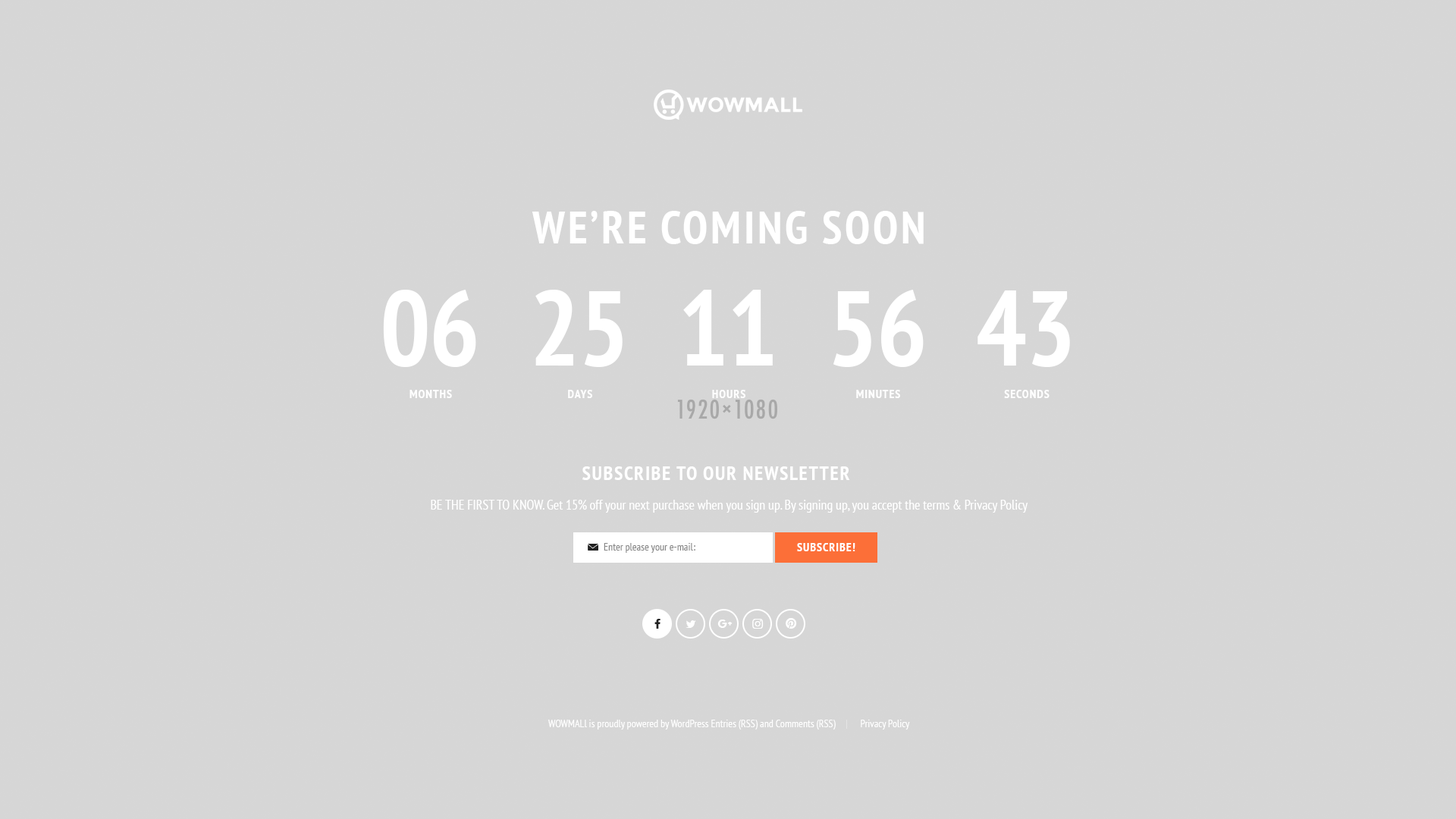
<style>
.page{position:relative;width:1456px;height:819px;background:#d6d6d6}
.page>*{position:absolute;margin:0}
.t1{font:45.5px "PTSans-NarrowBold";letter-spacing:0.06em;color:#ffffff;text-transform:uppercase}
.t2{font:106.2px "PTSans-NarrowBold";letter-spacing:-0.02em;color:#ffffff;text-transform:uppercase}
.t3{font:12.1px "PTSans-NarrowBold";letter-spacing:0.06em;color:#ffffff;text-transform:uppercase}
.t4{font:19.7px "PTSans-NarrowBold";letter-spacing:0.06em;color:#ffffff;text-transform:uppercase}
.t5{font:13.6px "PTSans-Narrow";color:#ffffff}
.t6{font:10.6px "PTSans-Narrow";color:#888888}
.t7{font:10.6px "PTSans-Narrow";color:#ffffff}
</style>
<div class="page">
<p class="t1" style="left:532px;top:211px;width:392px;height:33px">We’re Coming Soon</p>
<p class="t2" style="left:383px;top:290px;width:93px;height:77px">06</p>
<p class="t2" style="left:535px;top:290px;width:88px;height:77px">25</p>
<p class="t2" style="left:683px;top:290px;width:90px;height:76px">11</p>
<p class="t2" style="left:833px;top:290px;width:91px;height:77px">56</p>
<p class="t2" style="left:977px;top:290px;width:93px;height:77px">43</p>
<p class="t3" style="left:409px;top:390px;width:43px;height:8px">Months</p>
<p class="t3" style="left:568px;top:390px;width:24px;height:8px">days</p>
<p class="t3" style="left:712px;top:390px;width:33px;height:8px">Hours</p>
<p class="t3" style="left:856px;top:390px;width:44px;height:8px">minutes</p>
<p class="t3" style="left:1004px;top:390px;width:46px;height:8px">seconds</p>
<p class="t4" style="left:582px;top:466px;width:268px;height:14px">Subscribe to Our Newsletter</p>
<p class="t5" style="left:431px;top:500px;width:597px;height:13px">BE THE FIRST TO KNOW. Get 15% off your next purchase when you sign up. By signing up, you accept the terms &amp; Privacy Policy</p>
<p class="t6" style="left:604px;top:543px;width:91px;height:10px">Enter please your e-mail:</p>
<p class="t3" style="left:797px;top:543px;width:58px;height:8px">Subscribe!</p>
<p class="t7" style="left:548px;top:720px;width:362px;height:10px">WOWMALl is proudly powered by WordPress Entries (RSS) and Comments (RSS)           Privacy Policy</p>
</div>
